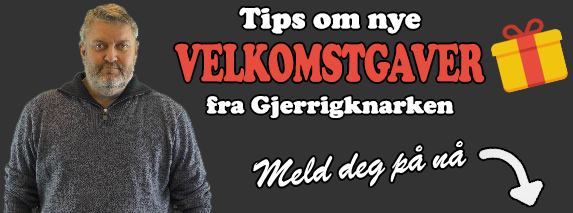
<style>
.page{position:relative;width:573px;height:213px;background:#333333}
.page>*{position:absolute;margin:0}
.t1{font:30px "CooperBlack";color:#ffffff}
.t2{font:55px "CooperBlack";letter-spacing:-0.025em;color:#e74c3c;scale:0.6 1}
.t3{font:25px "CooperBlack";color:#ffffff}
</style>
<div class="page">
<p class="t1" style="left:239px;top:7px;width:182px;height:27px">Tips om nye</p>
<p class="t2" style="left:175px;top:43px;width:310px;height:40px">VELKOMSTGAVER</p>
<p class="t3" style="left:206px;top:96px;width:248px;height:23px">fra Gjerrigknarken</p>
</div>
